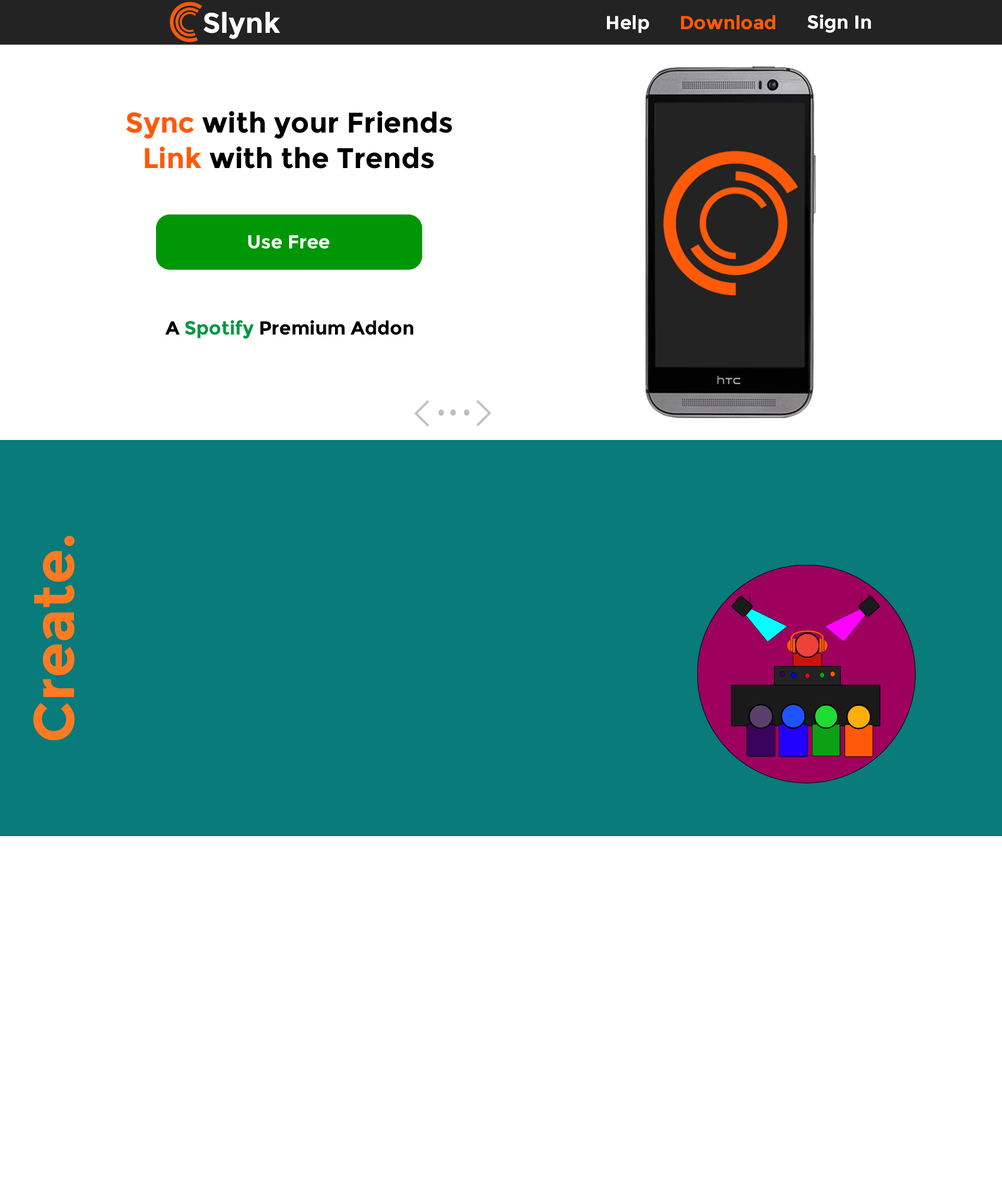
<style>
.page{position:relative;width:1002px;height:1190px;background:#ffffff}
.page>*{position:absolute;margin:0}
.t1{font:28.4px "Montserrat-Bold";color:#ffffff}
.t2{font:18.9px "Montserrat-Bold";color:#ffffff}
.t3{font:18.9px "Montserrat-Bold";color:#ff5a09}
.t4{font:28.4px "Montserrat-Bold";color:#000000}
.t5{font:28.4px "Montserrat-Bold";color:#ff5a09}
.t6{font:18.9px "Montserrat-Bold";color:#000000}
.t7{font:18.9px "Montserrat-Bold";color:#009742}
.t8{font:56.7px "Montserrat-Bold";color:#ff7a23}
</style>
<div class="page">
<p class="t1" style="left:204px;top:11px;width:76px;height:28px">Slynk</p>
<p class="t2" style="left:607px;top:15px;width:42px;height:18px">Help</p>
<p class="t3" style="left:681px;top:15px;width:95px;height:15px">Download</p>
<p class="t2" style="left:807px;top:14px;width:64px;height:19px">Sign In</p>
<p class="t4" style="left:126px;top:111px;width:326px;height:28px"><span class="t5">Sync</span> with your Friends</p>
<p class="t4" style="left:145px;top:147px;width:289px;height:22px"><span class="t5">Link</span> with the Trends</p>
<p class="t2" style="left:248px;top:235px;width:81px;height:14px">Use Free</p>
<p class="t6" style="left:165px;top:320px;width:248px;height:19px">A <span class="t7">Spotify</span> Premium Addon</p>
<p class="t8" style="left:33px;top:535px;width:42px;height:206px;rotate:-90deg">Create.</p>
</div>
